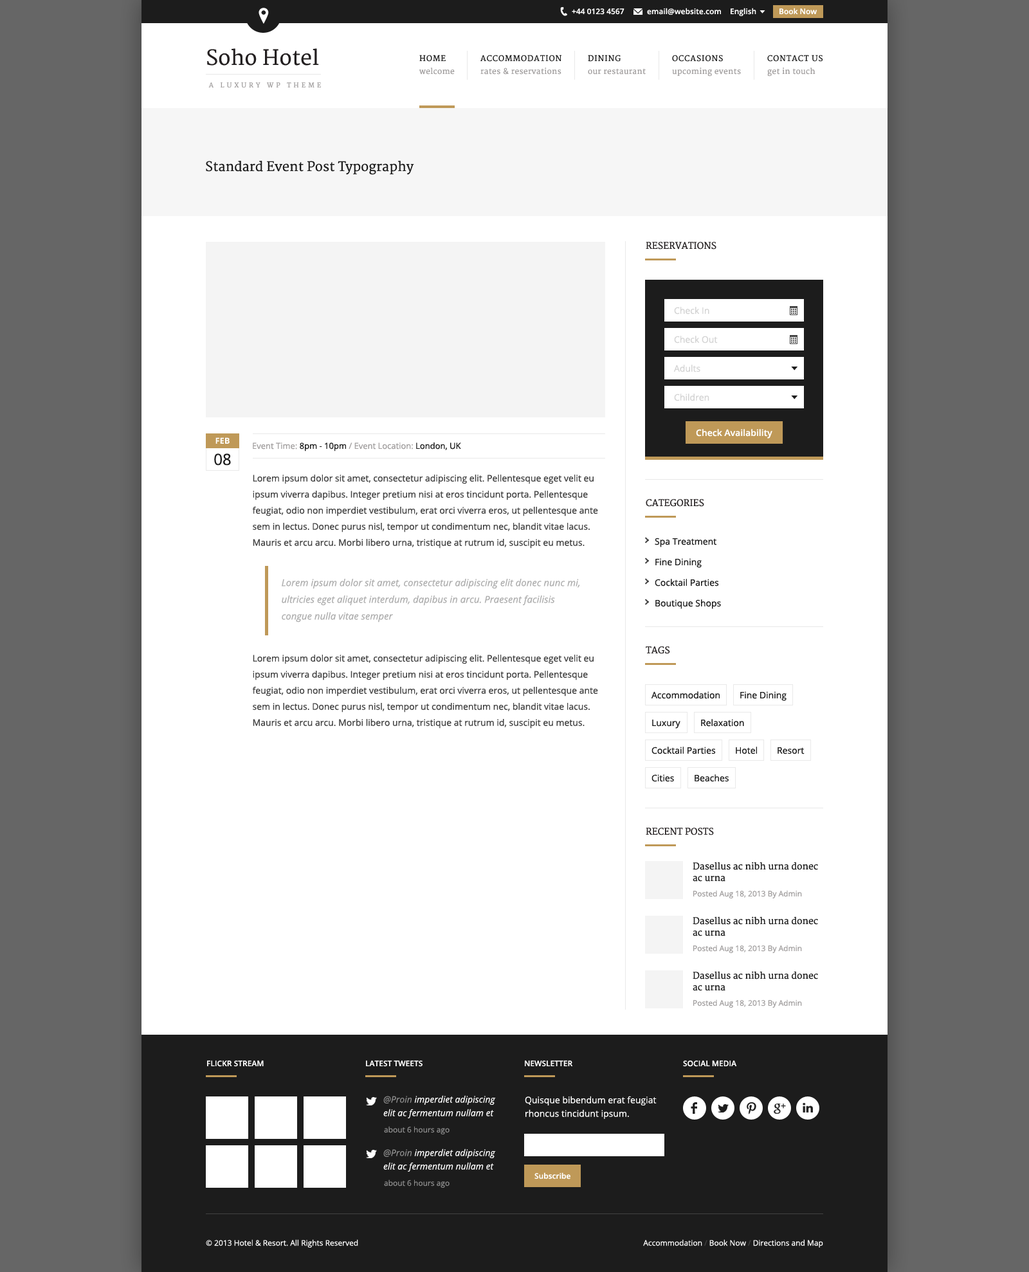
<style>
.page{position:relative;width:1029px;height:1272px;background:#ffffff}
.page>*{position:absolute;margin:0}
.t1{font:7.7px "OpenSans-Semibold";color:#ffffff}
.t2{font:20.6px "Merriweather";color:#231f20}
.t3{font:7.7px "Merriweather";letter-spacing:0.075em;color:#1c1c1c;text-transform:uppercase}
.t4{font:7.7px "Merriweather";letter-spacing:0.025em;color:#a09d9d}
.t5{font:6.4px "Merriweather";letter-spacing:0.4em;color:#a09d9d;text-transform:uppercase}
.t6{font:12.9px "Merriweather";color:#1c1c1c}
.t7{font:9px "Merriweather";color:#231f20;text-transform:uppercase}
.t8{font:9px "OpenSans";color:#d3d3d3}
.t9{font:8.4px "OpenSans-Bold";color:#ffffff;text-transform:uppercase}
.t10{font:9px "OpenSans-Semibold";color:#ffffff}
.t11{font:8.4px "OpenSans";color:#a09d9d}
.t12{font:8.4px "OpenSans";color:#1c1c1c}
.t13{font:15.4px "OpenSans";color:#1c1c1c}
.t14{font:9px/16.1px "OpenSans";color:#424242}
.t15{font:9px "OpenSans";color:#1c1c1c}
.t16{font:9.6px/16.7px "OpenSans-Italic";color:#aeaeae}
.t17{font:9px/11.6px "Merriweather";color:#1c1c1c}
.t18{font:7.7px "OpenSans";color:#a09d9d}
.t19{font:7.7px "OpenSans-Semibold";color:#ffffff;text-transform:uppercase}
.t20{font:9px/13.5px "OpenSans-Italic";color:#ffffff}
.t21{font:9px/13.5px "OpenSans-Italic";color:#8b8b8b}
.t22{font:9px/13.5px "OpenSans";color:#ffffff}
.t23{font:7.7px "OpenSans";color:#8b8b8b}
.t24{font:7.7px "OpenSans";color:#ffffff}
.t25{font:7.7px "OpenSans";color:#424242}
</style>
<div class="page">
<p class="t1" style="left:572px;top:8px;width:52px;height:7px">+44 0123 4567</p>
<p class="t1" style="left:647px;top:8px;width:74px;height:7px">email@website.com</p>
<p class="t1" style="left:730px;top:8px;width:26px;height:8px">English</p>
<p class="t1" style="left:779px;top:8px;width:37px;height:7px">Book Now</p>
<p class="t2" style="left:207px;top:48px;width:112px;height:18px">Soho Hotel</p>
<p class="t3" style="left:419px;top:55px;width:27px;height:7px">Home</p>
<p class="t3" style="left:480px;top:55px;width:81px;height:7px">Accommodation</p>
<p class="t3" style="left:588px;top:55px;width:32px;height:7px">Dining</p>
<p class="t3" style="left:672px;top:55px;width:51px;height:7px">Occasions</p>
<p class="t3" style="left:767px;top:55px;width:55px;height:7px">Contact Us</p>
<p class="t4" style="left:419px;top:68px;width:36px;height:7px">welcome</p>
<p class="t4" style="left:480px;top:68px;width:81px;height:7px">rates &amp; reservations</p>
<p class="t4" style="left:588px;top:68px;width:57px;height:7px">our restaurant</p>
<p class="t4" style="left:672px;top:68px;width:69px;height:9px">upcoming events</p>
<p class="t4" style="left:767px;top:68px;width:48px;height:9px">get in touch</p>
<p class="t5" style="left:208px;top:82px;width:113px;height:6px">A Luxury WP Theme</p>
<p class="t6" style="left:206px;top:161px;width:208px;height:14px">Standard Event Post Typography</p>
<p class="t7" style="left:645px;top:242px;width:71px;height:7px">Reservations</p>
<p class="t8" style="left:674px;top:307px;width:35px;height:7px">Check In</p>
<p class="t8" style="left:674px;top:336px;width:43px;height:7px">Check Out</p>
<p class="t8" style="left:673px;top:365px;width:27px;height:7px">Adults</p>
<p class="t8" style="left:674px;top:393px;width:35px;height:8px">Children</p>
<p class="t9" style="left:215px;top:437px;width:15px;height:7px">Feb</p>
<p class="t10" style="left:696px;top:429px;width:76px;height:9px">Check Availability</p>
<p class="t11" style="left:253px;top:442px;width:208px;height:9px">Event Time: <span class="t12">8pm - 10pm</span> / Event Location: <span class="t12">London, UK</span></p>
<p class="t13" style="left:214px;top:453px;width:17px;height:12px">08</p>
<p class="t14" style="left:252px;top:474px;width:346px;height:74px">Lorem ipsum dolor sit amet, consectetur adipiscing elit. Pellentesque eget velit eu ipsum viverra dapibus. Integer pretium nisi at eros tincidunt porta. Pellentesque feugiat, odio non imperdiet vestibulum, erat orci viverra eros, ut pellentesque ante sem in lectus. Donec purus nisl, tempor ut condimentum nec, blandit vitae lacus. Mauris et arcu arcu. Morbi libero urna, tristique at rutrum id, suscipit eu metus.</p>
<p class="t7" style="left:645px;top:499px;width:59px;height:8px">Categories</p>
<p class="t15" style="left:654px;top:537px;width:62px;height:10px">Spa Treatment</p>
<p class="t15" style="left:655px;top:558px;width:46px;height:10px">Fine Dining</p>
<p class="t16" style="left:282px;top:579px;width:298px;height:43px">Lorem ipsum dolor sit amet, consectetur adipiscing elit donec nunc mi, ultricies eget aliquet interdum, dapibus in arcu. Praesent facilisis congue nulla vitae semper</p>
<p class="t15" style="left:654px;top:579px;width:65px;height:7px">Cocktail Parties</p>
<p class="t15" style="left:655px;top:599px;width:66px;height:10px">Boutique Shops</p>
<p class="t7" style="left:645px;top:646px;width:25px;height:8px">Tags</p>
<p class="t14" style="left:252px;top:654px;width:346px;height:74px">Lorem ipsum dolor sit amet, consectetur adipiscing elit. Pellentesque eget velit eu ipsum viverra dapibus. Integer pretium nisi at eros tincidunt porta. Pellentesque feugiat, odio non imperdiet vestibulum, erat orci viverra eros, ut pellentesque ante sem in lectus. Donec purus nisl, tempor ut condimentum nec, blandit vitae lacus. Mauris et arcu arcu. Morbi libero urna, tristique at rutrum id, suscipit eu metus.</p>
<p class="t15" style="left:651px;top:691px;width:68px;height:8px">Accommodation</p>
<p class="t15" style="left:740px;top:691px;width:46px;height:10px">Fine Dining</p>
<p class="t15" style="left:652px;top:719px;width:28px;height:9px">Luxury</p>
<p class="t15" style="left:701px;top:719px;width:43px;height:7px">Relaxation</p>
<p class="t15" style="left:651px;top:746px;width:65px;height:8px">Cocktail Parties</p>
<p class="t15" style="left:735px;top:746px;width:22px;height:8px">Hotel</p>
<p class="t15" style="left:777px;top:747px;width:27px;height:7px">Resort</p>
<p class="t15" style="left:651px;top:774px;width:23px;height:8px">Cities</p>
<p class="t15" style="left:694px;top:774px;width:34px;height:8px">Beaches</p>
<p class="t7" style="left:645px;top:827px;width:69px;height:8px">Recent Posts</p>
<p class="t17" style="left:692px;top:861px;width:126px;height:20px">Dasellus ac nibh urna donec <br>ac urna</p>
<p class="t18" style="left:693px;top:890px;width:109px;height:8px">Posted Aug 18, 2013 By Admin</p>
<p class="t17" style="left:692px;top:916px;width:126px;height:20px">Dasellus ac nibh urna donec <br>ac urna</p>
<p class="t18" style="left:693px;top:944px;width:109px;height:9px">Posted Aug 18, 2013 By Admin</p>
<p class="t17" style="left:692px;top:971px;width:126px;height:20px">Dasellus ac nibh urna donec <br>ac urna</p>
<p class="t18" style="left:693px;top:999px;width:109px;height:8px">Posted Aug 18, 2013 By Admin</p>
<p class="t19" style="left:207px;top:1060px;width:57px;height:7px">Flickr Stream</p>
<p class="t19" style="left:366px;top:1060px;width:56px;height:7px">Latest Tweets</p>
<p class="t19" style="left:525px;top:1060px;width:48px;height:7px">Newsletter</p>
<p class="t19" style="left:683px;top:1060px;width:54px;height:7px">Social Media</p>
<p class="t20" style="left:383px;top:1095px;width:113px;height:23px"><span class="t21">@Proin </span>imperdiet adipiscing elit ac fermentum nullam et</p>
<p class="t22" style="left:525px;top:1095px;width:131px;height:24px">Quisque bibendum erat feugiat rhoncus tincidunt ipsum.</p>
<p class="t23" style="left:384px;top:1126px;width:65px;height:8px">about 6 hours ago</p>
<p class="t20" style="left:383px;top:1148px;width:113px;height:23px"><span class="t21">@Proin</span> imperdiet adipiscing elit ac fermentum nullam et</p>
<p class="t23" style="left:384px;top:1179px;width:65px;height:8px">about 6 hours ago</p>
<p class="t1" style="left:534px;top:1172px;width:36px;height:7px">Subscribe</p>
<p class="t24" style="left:206px;top:1239px;width:152px;height:8px">© 2013 Hotel &amp; Resort. All Rights Reserved</p>
<p class="t24" style="left:643px;top:1239px;width:180px;height:8px">Accommodation <span class="t25">/</span> Book Now <span class="t25">/</span> Directions and Map</p>
</div>
